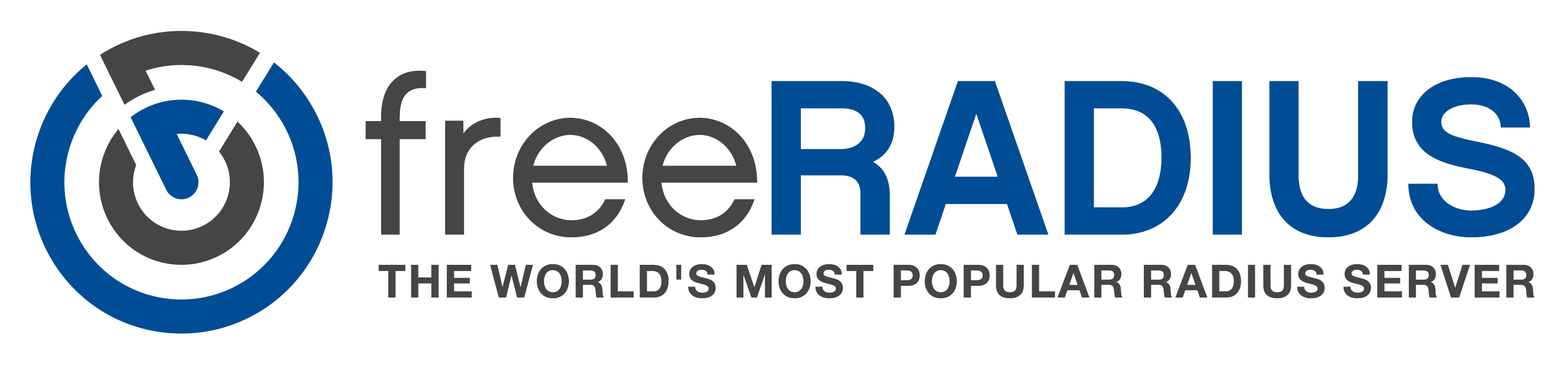
<style>
.page{position:relative;width:1568px;height:366px;background:#ffffff}
.page>*{position:absolute;margin:0}
.t1{font:221px "Chalet-LondonNineteenSixty";color:#454545}
.t2{font:221px "Chalet-NewYorkNineteenEighty";color:#004d95}
.t3{font:45.6px "HelveticaNeueLTCom-Bd";letter-spacing:0.045em;color:#454545}
</style>
<div class="page">
<p class="t1" style="left:366px;top:70px;width:391px;height:167px">free</p>
<p class="t2" style="left:772px;top:77px;width:763px;height:160px">RADIUS</p>
<p class="t3" style="left:378px;top:263px;width:1157px;height:35px">THE WORLD'S MOST POPULAR RADIUS SERVER</p>
</div>
